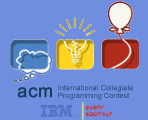
<style>
.page{position:relative;width:148px;height:120px;background:#708edf}
.page>*{position:absolute;margin:0}
.t1{font:18px "ArialMT";letter-spacing:0.025em;color:#143f60;font-weight:bold}
.t2{font:7px "ArialMT";letter-spacing:0.025em}
</style>
<div class="page">
<p class="t1" style="left:17px;top:87px;width:35px;height:11px">acm</p>
<p class="t2" style="left:58px;top:85px;width:75px;height:7px">International Collegiate</p>
<p class="t2" style="left:58px;top:93px;width:71px;height:7px">Programming Contest</p>
</div>
